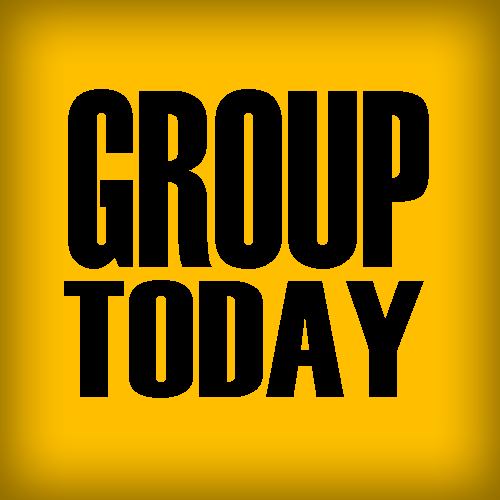
<style>
.page{position:relative;width:500px;height:500px;background:#000000}
.page>*{position:absolute;margin:0}
.t1{font:251.1px "Haettenschweiler";color:#000000;scale:0.76 1}
.t2{font:166.3px "Haettenschweiler";color:#000000;scale:1.09 1}
</style>
<div class="page">
<p class="t1" style="left:68px;top:89px;width:361px;height:180px">GROUP</p>
<p class="t2" style="left:64px;top:280px;width:360px;height:118px">TODAY</p>
</div>
